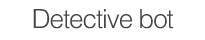
<style>
.page{position:relative;width:205px;height:40px;background:#ffffff}
.page>*{position:absolute;margin:0}
.t1{font:26.1px "Helvetica-Light";letter-spacing:-0.04em;color:#454545}
</style>
<div class="page">
<p class="t1" style="left:33px;top:9px;width:140px;height:20px">Detective bot</p>
</div>
